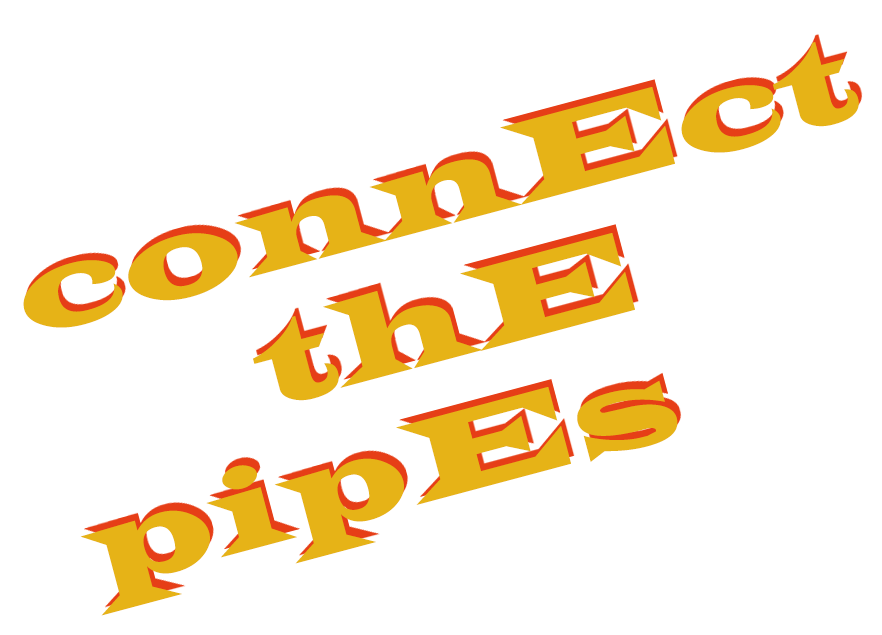
<style>
.page{position:relative;width:882px;height:635px;background:#ffffff}
.page>*{position:absolute;margin:0}
.t1{font:120px "LatinWide";letter-spacing:0.025em;color:#e6b317}
</style>
<div class="page">
<p class="t1" style="left:23px;top:42px;width:836px;height:286px;rotate:-15deg">connEct</p>
<p class="t1" style="left:253px;top:233px;width:382px;height:168px;rotate:-15deg">thE</p>
<p class="t1" style="left:80px;top:380px;width:598px;height:236px;rotate:-15deg">pipEs</p>
</div>
